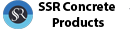
<style>
.page{position:relative;width:130px;height:30px;background:#ffffff}
.page>*{position:absolute;margin:0}
.t1{font:13.1px "MyriadPro-Bold";color:#000000}
</style>
<div class="page">
<p class="t1" style="left:38px;top:2px;width:77px;height:25px;text-align:center">SSR Concrete <br>Products</p>
</div>
